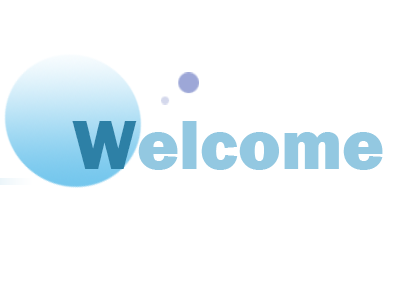
<style>
.page{position:relative;width:400px;height:300px;background:#ffffff}
.page>*{position:absolute;margin:0}
.t1{font:72px "FranklinGothic-Heavy";color:#93c8e1}
.t2{font:72px "FranklinGothic-Heavy";color:#2d80a6}
</style>
<div class="page">
<p class="t1" style="left:72px;top:121px;width:311px;height:49px"><span class="t2">W</span>elcome</p>
</div>
